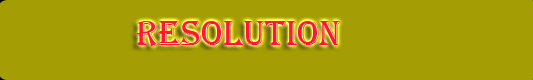
<style>
.page{position:relative;width:533px;height:80px;background:#a49e04}
.page>*{position:absolute;margin:0}
.t1{font:36px "Algerian";color:#ff1536}
</style>
<div class="page">
<p class="t1" style="left:136px;top:21px;width:205px;height:27px">resolution</p>
</div>
